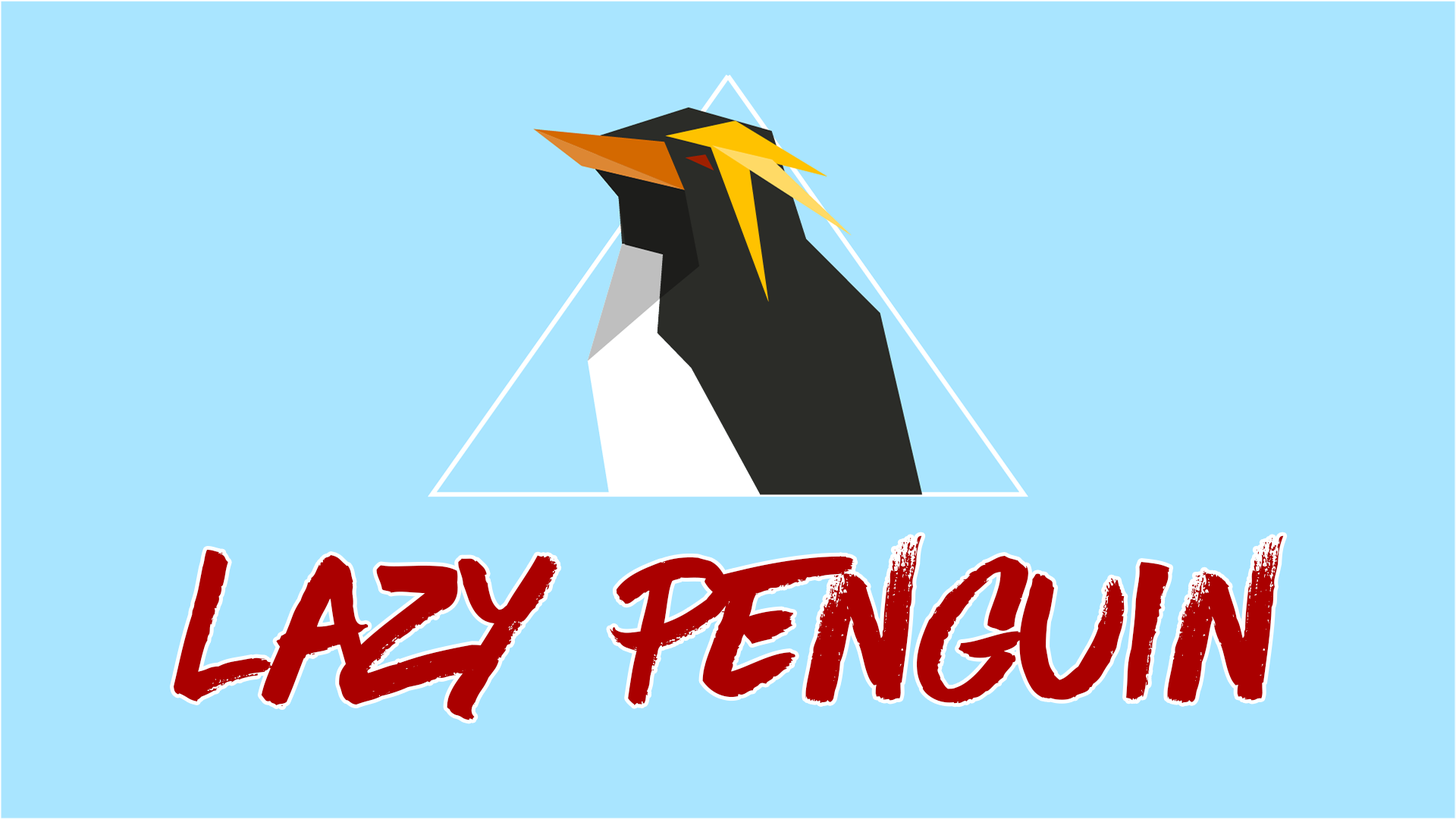
<style>
.page{position:relative;width:1456px;height:819px;background:#a9e5ff}
.page>*{position:absolute;margin:0}
.t1{font:209.3px "SVN-HaveHeart2";color:#aa0000}
</style>
<div class="page">
<p class="t1" style="left:174px;top:535px;width:1110px;height:185px">lazy penguin</p>
</div>
